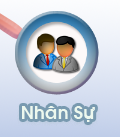
<style>
.page{position:relative;width:120px;height:137px}
.page>*{position:absolute;margin:0}
.t1{font:18px "VNI-Avo-Bold";color:#edf8ee}
</style>
<div class="page">
<p class="t1" style="left:22px;top:106px;width:73px;height:16px">Nhaân Söï</p>
</div>
